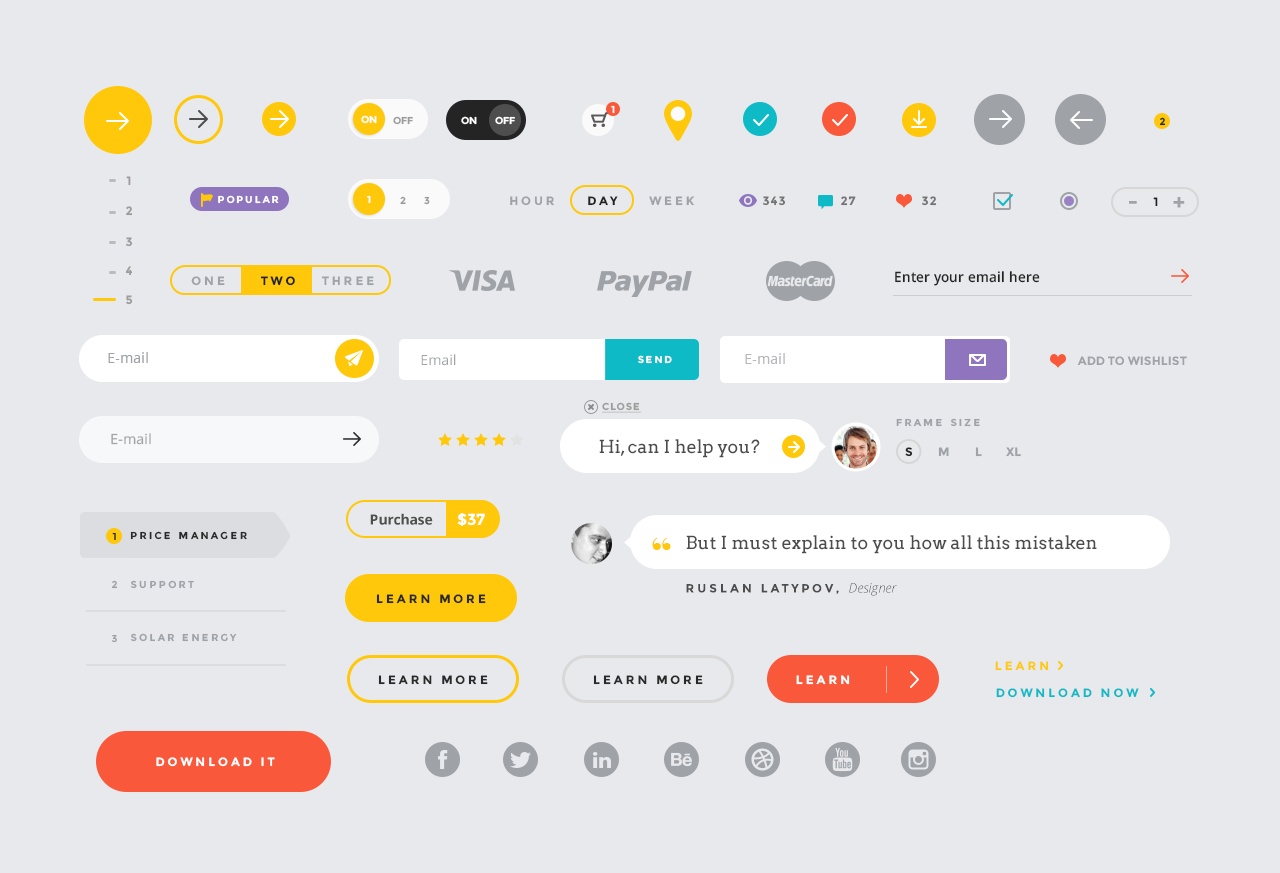
<style>
.page{position:relative;width:1280px;height:873px;background:#e8e9ed}
.page>*{position:absolute;margin:0}
.t1{font:10px "Montserrat-Bold";color:#ffffff;text-transform:uppercase}
.t2{font:10px "Montserrat-Bold";color:#9c9c9c;text-transform:uppercase}
.t3{font:10px "Montserrat-Bold";letter-spacing:0.24em;color:#2a2a2a;text-transform:uppercase}
.t4{font:12px "Montserrat-Bold";color:#9c9c9c;text-transform:uppercase}
.t5{font:10px "Montserrat-Bold";letter-spacing:0.18em;color:#ffffff;text-transform:uppercase}
.t6{font:12px "Montserrat-Bold";letter-spacing:0.24em;color:#9fa3a7;text-transform:uppercase}
.t7{font:12px "Montserrat-Bold";letter-spacing:0.24em;color:#212121;text-transform:uppercase}
.t8{font:12px "Montserrat-Bold";letter-spacing:0.08em;color:#757575;text-transform:uppercase}
.t9{font:22px "Montserrat-Bold";letter-spacing:0.24em;color:#9fa3a7;text-transform:uppercase}
.t10{font:14.2px "OpenSans-Semibold";color:#242424;scale:0.95 1}
.t11{font:14px "OpenSans";color:#9fa3a7}
.t12{font:14px "OpenSans";color:#b5b8bb}
.t13{font:12px "Montserrat-Bold";color:#9fa3a7;text-transform:uppercase}
.t14{font:10px "Montserrat-Bold";letter-spacing:0.12em;color:#9c9c9c;text-transform:uppercase;text-decoration:underline}
.t15{font:10px "Montserrat-Bold";letter-spacing:0.24em;color:#9fa3a7;text-transform:uppercase}
.t16{font:18px "Arvo";color:#4c4c4c}
.t17{font:12px "Montserrat-Bold";letter-spacing:0.24em;color:#242424;text-transform:uppercase}
.t18{font:14px "OpenSans-Bold";color:#4e4e4e}
.t19{font:16px "Montserrat-Bold";color:#ffffff;text-transform:uppercase}
.t20{font:10px "Montserrat-Bold";letter-spacing:0.24em;color:#292929;text-transform:uppercase}
.t21{font:42px "PlayfairDisplay-Black";color:#ffc80a}
.t22{font:12px "Montserrat-Bold";letter-spacing:0.24em;color:#4c4c4c;text-transform:uppercase}
.t23{font:13px "OpenSansLight-Italic";color:#4c4c4c}
.t24{font:12px "Montserrat-Bold";letter-spacing:0.24em;color:#292929;text-transform:uppercase}
.t25{font:12px "Montserrat-Bold";letter-spacing:0.24em;color:#ffc80a;text-transform:uppercase}
.t26{font:12px "Montserrat-Bold";letter-spacing:0.24em;color:#ffffff;text-transform:uppercase}
.t27{font:12px "Montserrat-Bold";letter-spacing:0.24em;color:#0ebac5;text-transform:uppercase}
</style>
<div class="page">
<p class="t1" style="left:611px;top:105px;width:4px;height:9px">1</p>
<p class="t1" style="left:361px;top:115px;width:16px;height:9px">on</p>
<p class="t2" style="left:393px;top:116px;width:20px;height:9px">off</p>
<p class="t1" style="left:461px;top:116px;width:16px;height:9px">on</p>
<p class="t1" style="left:495px;top:116px;width:20px;height:9px">off</p>
<p class="t3" style="left:1159px;top:117px;width:7px;height:9px">2</p>
<p class="t4" style="left:126px;top:176px;width:5px;height:10px">1</p>
<p class="t5" style="left:218px;top:195px;width:61px;height:9px">popular</p>
<p class="t1" style="left:367px;top:195px;width:4px;height:9px">1</p>
<p class="t2" style="left:400px;top:196px;width:6px;height:9px">2</p>
<p class="t2" style="left:424px;top:196px;width:6px;height:9px">3</p>
<p class="t6" style="left:510px;top:196px;width:44px;height:10px">Hour</p>
<p class="t7" style="left:588px;top:196px;width:30px;height:10px">Day</p>
<p class="t6" style="left:649px;top:196px;width:46px;height:10px">week</p>
<p class="t8" style="left:763px;top:196px;width:23px;height:10px">343</p>
<p class="t8" style="left:841px;top:196px;width:15px;height:10px">27</p>
<p class="t8" style="left:922px;top:196px;width:15px;height:10px">32</p>
<p class="t7" style="left:1153px;top:197px;width:5px;height:10px">1</p>
<p class="t9" style="left:1173px;top:197px;width:12px;height:11px">+</p>
<p class="t4" style="left:126px;top:206px;width:7px;height:10px">2</p>
<p class="t9" style="left:1129px;top:201px;width:8px;height:3px">-</p>
<p class="t4" style="left:126px;top:237px;width:7px;height:10px">3</p>
<p class="t4" style="left:125px;top:266px;width:8px;height:10px">4</p>
<p class="t6" style="left:191px;top:276px;width:34px;height:10px">One</p>
<p class="t7" style="left:260px;top:276px;width:35px;height:10px">two</p>
<p class="t6" style="left:321px;top:276px;width:53px;height:10px">three</p>
<p class="t10" style="left:895px;top:271px;width:145px;height:15px">Enter your email here</p>
<p class="t4" style="left:126px;top:295px;width:7px;height:10px">5</p>
<p class="t11" style="left:108px;top:352px;width:40px;height:11px">E-mail</p>
<p class="t12" style="left:745px;top:353px;width:40px;height:11px">E-mail</p>
<p class="t11" style="left:421px;top:354px;width:35px;height:12px">Email</p>
<p class="t5" style="left:638px;top:355px;width:34px;height:9px">send</p>
<p class="t13" style="left:1077px;top:356px;width:110px;height:9px">Add to wishlist</p>
<p class="t14" style="left:602px;top:402px;width:40px;height:11px">close</p>
<p class="t15" style="left:896px;top:418px;width:84px;height:9px">Frame Size</p>
<p class="t11" style="left:111px;top:433px;width:40px;height:12px">E-mail</p>
<p class="t16" style="left:599px;top:439px;width:161px;height:19px">Hi, can I help you?</p>
<p class="t17" style="left:905px;top:447px;width:8px;height:10px">s</p>
<p class="t6" style="left:938px;top:447px;width:11px;height:10px">m</p>
<p class="t6" style="left:975px;top:447px;width:7px;height:10px">l</p>
<p class="t13" style="left:1006px;top:447px;width:15px;height:10px">xl</p>
<p class="t18" style="left:370px;top:513px;width:63px;height:12px">Purchase</p>
<p class="t19" style="left:457px;top:513px;width:28px;height:13px">$37</p>
<p class="t3" style="left:112px;top:532px;width:4px;height:8px">1</p>
<p class="t20" style="left:130px;top:531px;width:117px;height:9px">Price Manager</p>
<p class="t21" style="left:652px;top:537px;width:19px;height:13px">“</p>
<p class="t16" style="left:686px;top:535px;width:411px;height:19px">But I must explain to you how all this mistaken</p>
<p class="t15" style="left:111px;top:580px;width:7px;height:9px">2</p>
<p class="t15" style="left:130px;top:580px;width:64px;height:9px">support</p>
<p class="t22" style="left:686px;top:583px;width:211px;height:13px">ruslan latypov, <span class="t23">Designer</span></p>
<p class="t24" style="left:376px;top:594px;width:110px;height:10px">Learn more</p>
<p class="t15" style="left:111px;top:634px;width:6px;height:9px">3</p>
<p class="t15" style="left:130px;top:633px;width:107px;height:9px">Solar Energy</p>
<p class="t25" style="left:995px;top:661px;width:54px;height:10px">Learn</p>
<p class="t24" style="left:378px;top:675px;width:110px;height:10px">Learn more</p>
<p class="t24" style="left:593px;top:675px;width:110px;height:10px">Learn more</p>
<p class="t26" style="left:796px;top:675px;width:54px;height:10px">Learn</p>
<p class="t27" style="left:996px;top:688px;width:143px;height:10px">download now</p>
<p class="t26" style="left:156px;top:757px;width:119px;height:10px">Download it</p>
</div>
